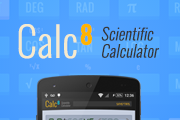
<style>
.page{position:relative;width:180px;height:120px}
.page>*{position:absolute;margin:0}
.t1{font:39.8px "Oswald-Light";color:#f6eacd}
.t2{font:39.8px "Oswald-Light";letter-spacing:0.04em;color:#f6eacd}
.t3{font:39.8px "Oswald-Bold";letter-spacing:0.12em;color:#ffb300}
.t4{font:15.9px/17.2px "Oswald-Light";color:#373737;font-style:italic}
</style>
<div class="page">
<p class="t1" style="left:18px;top:23px;width:74px;height:36px">Cal<span class="t2">c</span><span class="t3">8</span></p>
<p class="t4" style="left:101px;top:26px;width:59px;height:32px">Scientific<br>Calculator</p>
</div>
